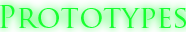
<style>
.page{position:relative;width:186px;height:32px}
.page>*{position:absolute;margin:0}
.t1{font:30px "TrajanPro-Regular";color:#17ff30}
</style>
<div class="page">
<p class="t1" style="left:0px;top:5px;width:186px;height:23px">Prototypes</p>
</div>
